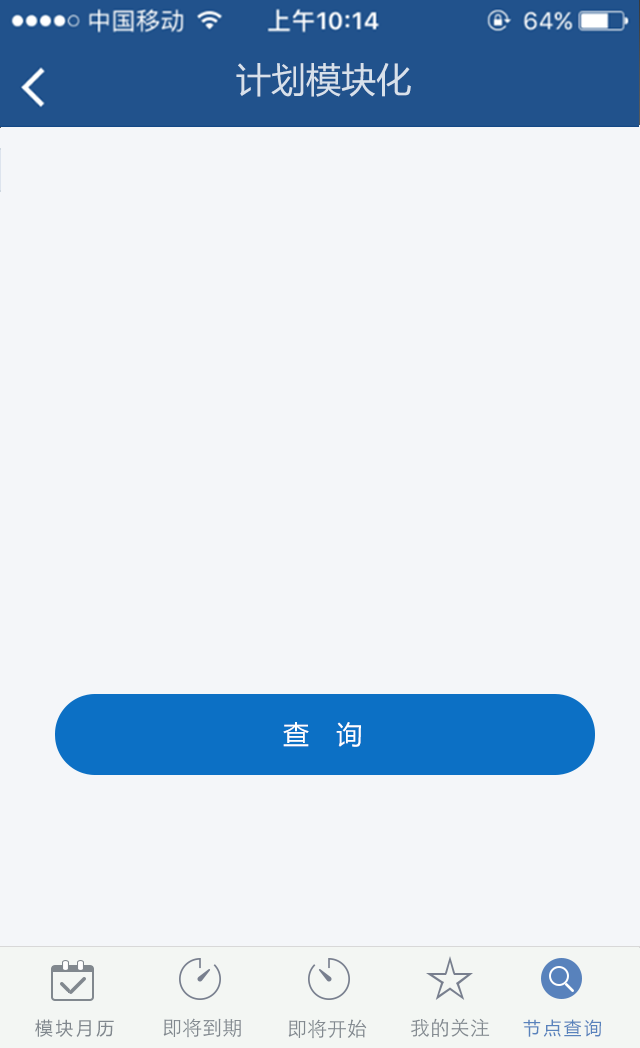
<style>
.page{position:relative;width:640px;height:1048px;background:#f4f6f9}
.page>*{position:absolute;margin:0}
.t1{font:35px "MicrosoftYaHei";color:#d8e1eb}
.t2{font:26px "MicrosoftYaHei";letter-spacing:0.15em;color:#ffffff}
.t3{font:18px "MicrosoftYaHei";letter-spacing:0.15em;color:#81888e}
.t4{font:18px "MicrosoftYaHei";letter-spacing:0.15em;color:#5882bc}
</style>
<div class="page">
<p class="t1" style="left:236px;top:63px;width:175px;height:34px">计划模块化</p>
<p class="t2" style="left:283px;top:722px;width:78px;height:25px">查  询</p>
<p class="t3" style="left:35px;top:1019px;width:79px;height:18px">模块月历</p>
<p class="t4" style="left:523px;top:1019px;width:78px;height:18px">节点查询</p>
</div>
